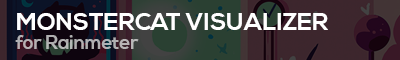
<style>
.page{position:relative;width:400px;height:60px}
.page>*{position:absolute;margin:0}
.t1{font:24px "NexaBold";color:#ffffff}
.t2{font:18.7px "NexaBold";color:#b0b0b3}
</style>
<div class="page">
<p class="t1" style="left:17px;top:13px;width:311px;height:17px">MONSTERCAT VISUALIZER</p>
<p class="t2" style="left:15px;top:35px;width:124px;height:14px">for Rainmeter</p>
</div>
